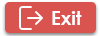
<style>
.page{position:relative;width:100px;height:36px;background:#d9534f}
.page>*{position:absolute;margin:0}
.t1{font:18.8px "CenturyGothic-Bold";color:#ffffff}
</style>
<div class="page">
<p class="t1" style="left:52px;top:11px;width:30px;height:14px">Exit</p>
</div>
